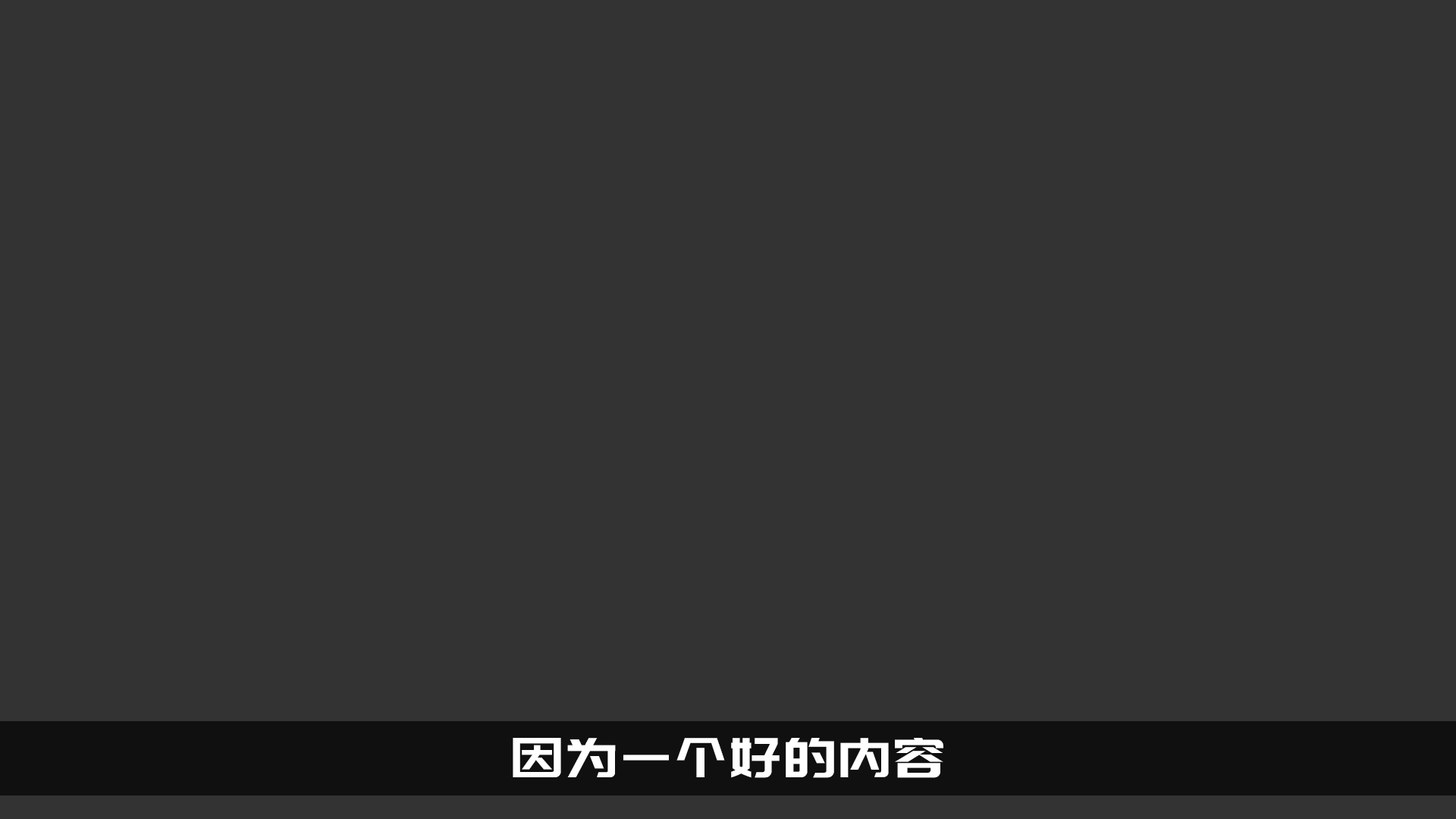
<style>
.page{position:relative;width:1456px;height:819px;background:#333333}
.page>*{position:absolute;margin:0}
.t1{font:54.6px "PangMenZhengDao-3";color:#ffffff}
</style>
<div class="page">
<p class="t1" style="left:513px;top:738px;width:430px;height:40px">因为一个好的内容</p>
</div>
